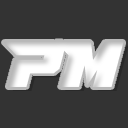
<style>
.page{position:relative;width:128px;height:128px;background:#333333}
.page>*{position:absolute;margin:0}
.t1{font:55px "Boge";color:#ffffff}
</style>
<div class="page">
<p class="t1" style="left:3px;top:41px;width:121px;height:46px">PM</p>
</div>
